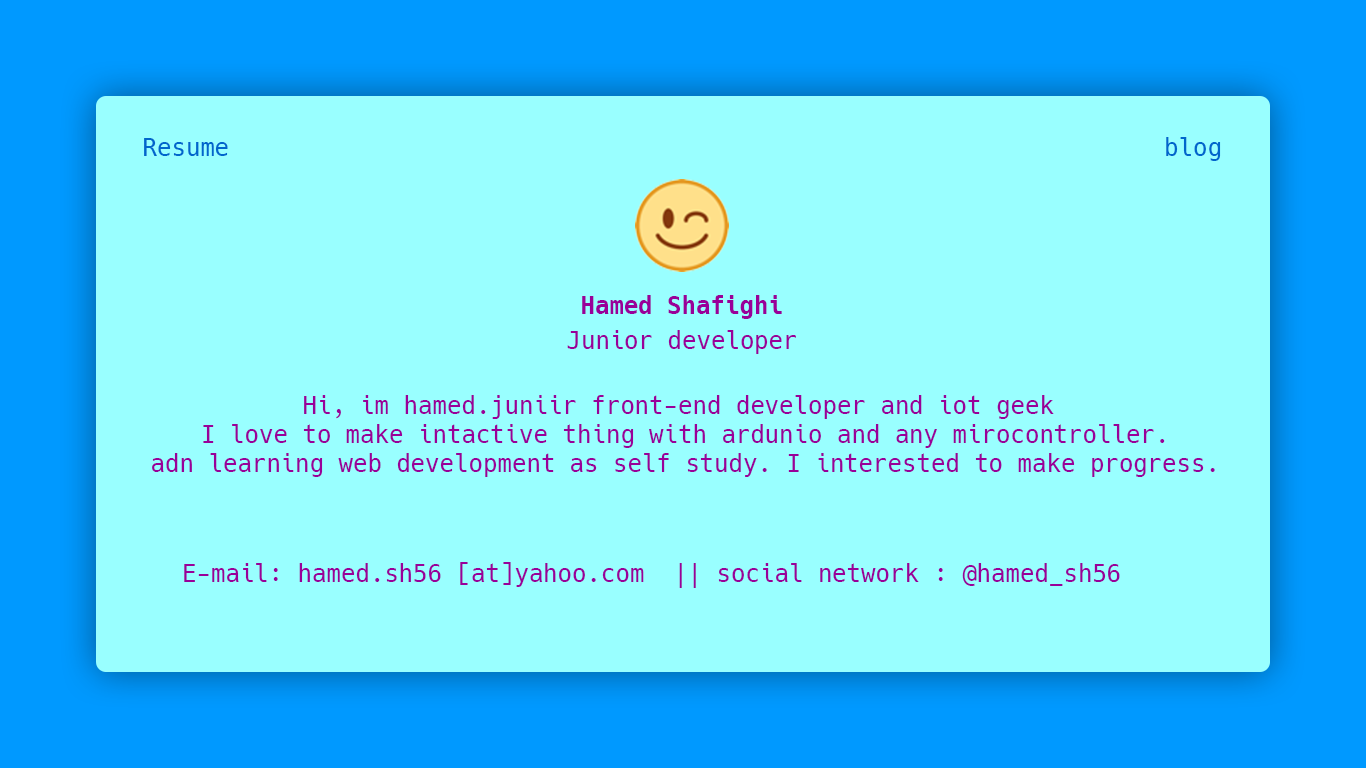
<style>
.page{position:relative;width:1366px;height:768px;background:#99ffff}
.page>*{position:absolute;margin:0}
.t1{font:24px "Hack-Regular";color:#0066cc}
.t2{font:24px "Hack-Bold";color:#990099}
.t3{font:24px "Hack-Regular";color:#990099}
</style>
<div class="page">
<p class="t1" style="left:1166px;top:137px;width:55px;height:24px">blog</p>
<p class="t1" style="left:144px;top:138px;width:84px;height:18px">Resume</p>
<p class="t2" style="left:582px;top:295px;width:200px;height:24px">Hamed Shafighi</p>
<p class="t3" style="left:567px;top:330px;width:229px;height:24px">Junior developer</p>
<p class="t3" style="left:152px;top:395px;width:1063px;height:82px;text-align:center">Hi, im hamed.juniir front-end developer and iot geek <br>I love to make intactive thing with ardunio and any mirocontroller.<br>adn learning web development as self study. I interested to make progress.</p>
<p class="t3" style="left:184px;top:562px;width:936px;height:26px">E-mail: hamed.sh56 [at]yahoo.com  || social network : @hamed_sh56</p>
</div>
